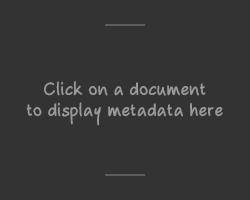
<style>
.page{position:relative;width:250px;height:200px;background:#333333}
.page>*{position:absolute;margin:0}
.t1{font:18px "gm";letter-spacing:0.025em;color:#9a9a9a}
</style>
<div class="page">
<p class="t1" style="left:26px;top:81px;width:197px;height:45px;text-align:center">Click on a document<br>to display metadata here</p>
</div>
